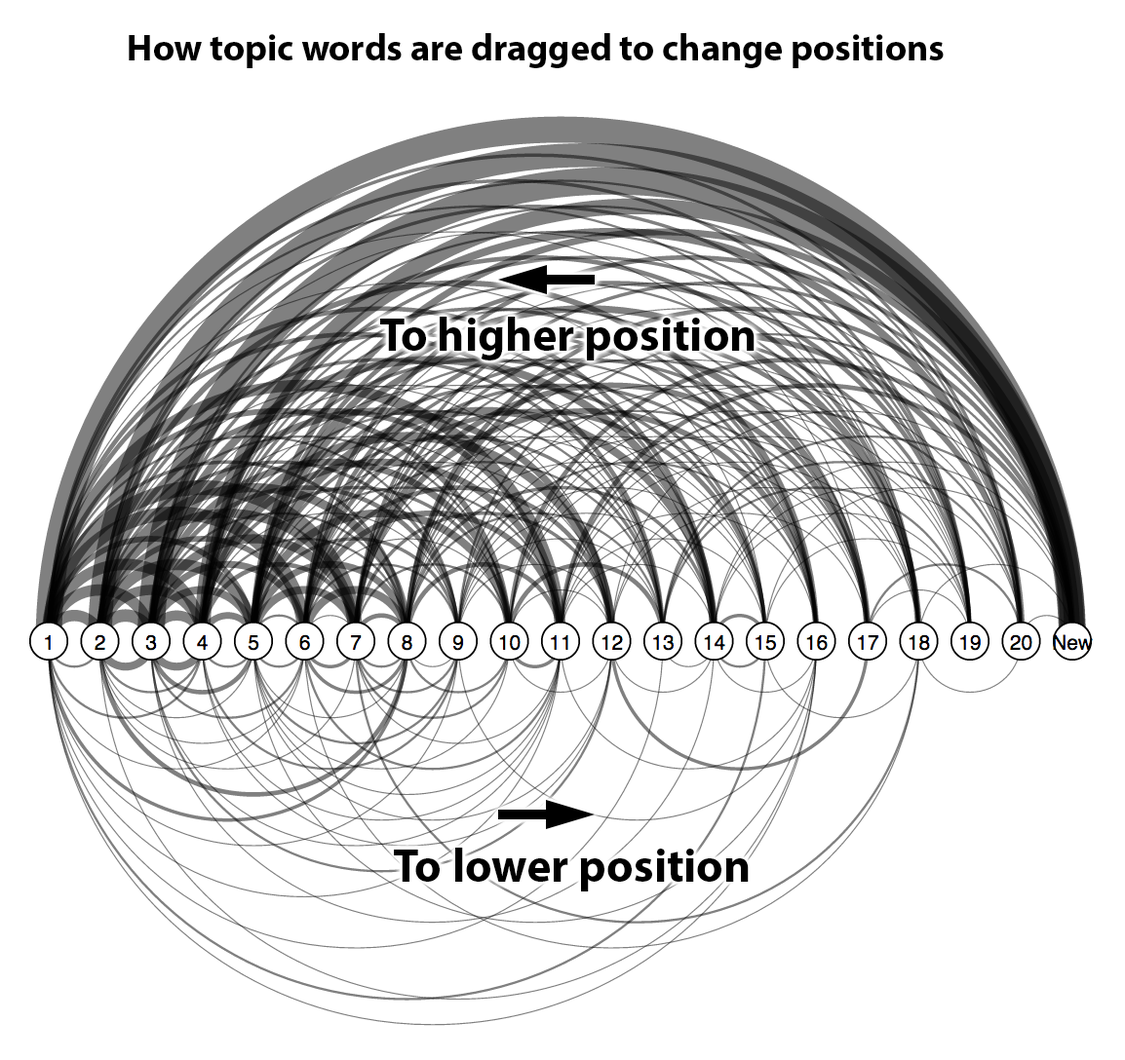
<style>
.page{position:relative;width:1125px;height:1060px;background:#ffffff}
.page>*{position:absolute;margin:0}
.t1{font:37.2px "MyriadPro-Bold";color:#000000}
.t2{font:46.8px "MyriadPro-Bold";color:#000000}
</style>
<div class="page">
<p class="t1" style="left:129px;top:33px;width:814px;height:35px">How topic words are dragged to change positions</p>
<p class="t2" style="left:380px;top:317px;width:374px;height:44px">To higher position</p>
<p class="t2" style="left:394px;top:848px;width:354px;height:44px">To lower position</p>
</div>
